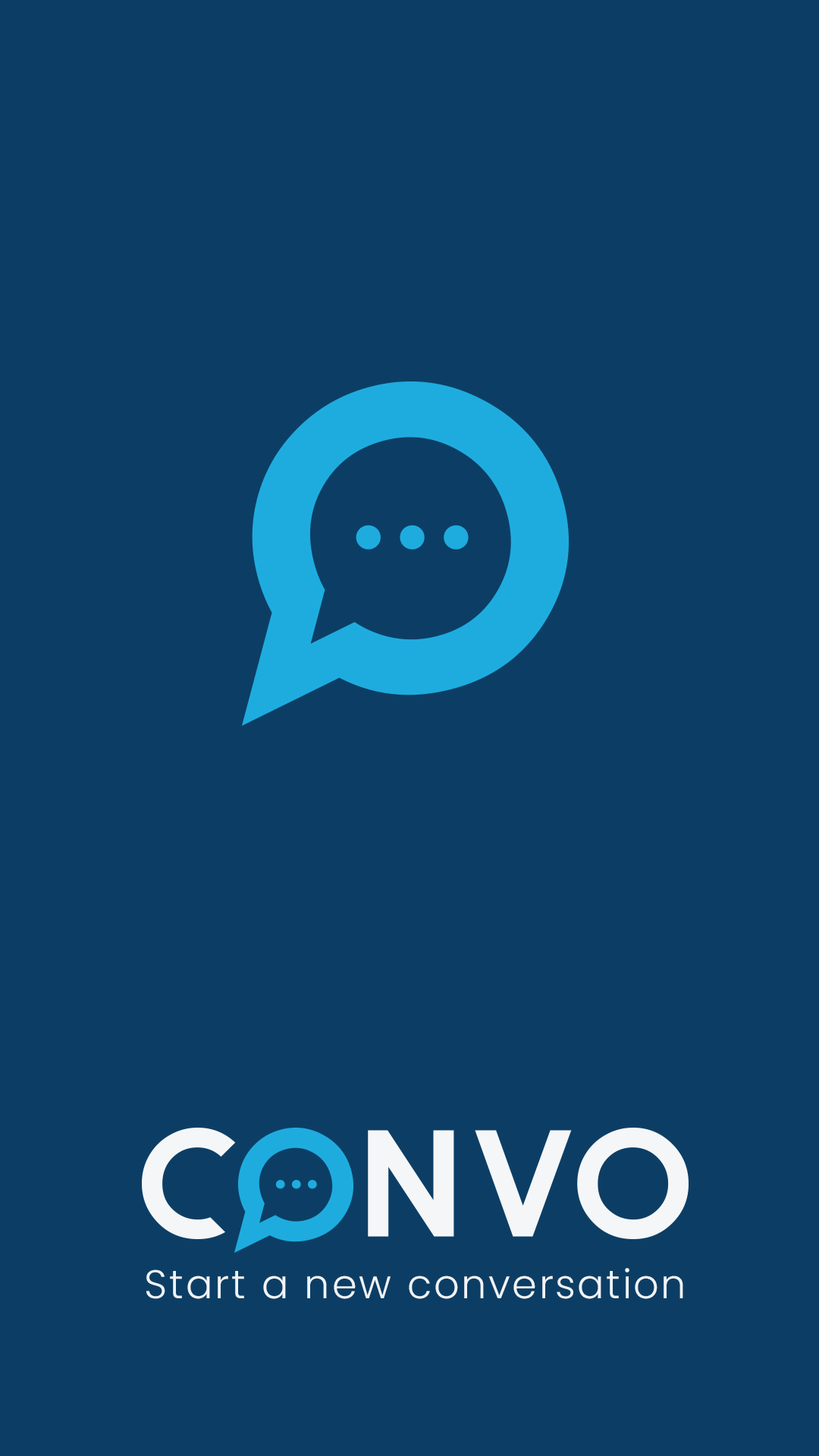
<style>
.page{position:relative;width:819px;height:1456px;background:#0c3e65}
.page>*{position:absolute;margin:0}
.t1{font:40.1px "Poppins-Light";letter-spacing:0.05em;color:#f0f4f7}
</style>
<div class="page">
<p class="t1" style="left:146px;top:1268px;width:537px;height:31px">Start a new conversation</p>
</div>
